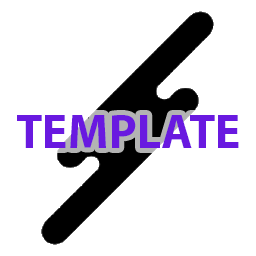
<style>
.page{position:relative;width:256px;height:256px;background:#ffffff}
.page>*{position:absolute;margin:0}
.t1{font:48px "MyriadPro-Bold";color:#6919e0}
</style>
<div class="page">
<p class="t1" style="left:17px;top:115px;width:222px;height:33px">TEMPLATE</p>
</div>
